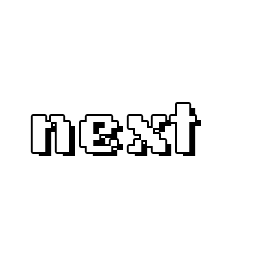
<style>
.page{position:relative;width:256px;height:256px;background:#ffffff}
.page>*{position:absolute;margin:0}
.t1{font:72px "LoRes12OT-Bold";color:#fefefe}
</style>
<div class="page">
<p class="t1" style="left:32px;top:104px;width:163px;height:48px">next</p>
</div>
